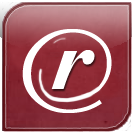
<style>
.page{position:relative;width:132px;height:133px}
.page>*{position:absolute;margin:0}
.t1{font:100px "Cochin-BoldItalic";letter-spacing:0.15em;color:#ffffff}
</style>
<div class="page">
<p class="t1" style="left:51px;top:50px;width:44px;height:39px">r</p>
</div>
